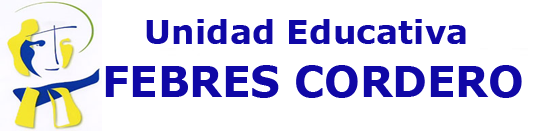
<style>
.page{position:relative;width:538px;height:131px;background:#ffffff}
.page>*{position:absolute;margin:0}
.t1{font:33.3px "Verdana-Bold";color:#1008a6}
.t2{font:41.7px "Verdana-Bold";color:#1008a6}
</style>
<div class="page">
<p class="t1" style="left:146px;top:19px;width:320px;height:25px">Unidad Educativa</p>
<p class="t2" style="left:105px;top:65px;width:417px;height:33px">FEBRES CORDERO</p>
</div>
